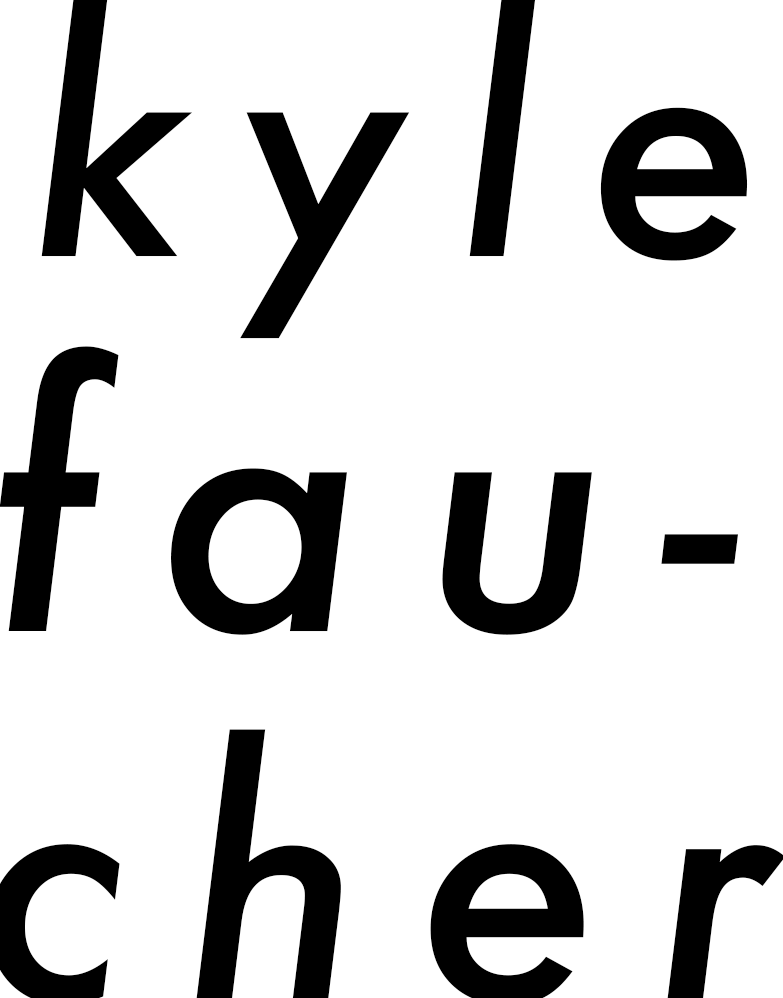
<style>
.page{position:relative;width:783px;height:998px;background:#ffffff}
.page>*{position:absolute;margin:0}
.t1{font:312.2px "Futura-MediumItalic";letter-spacing:0.16em;color:#000000}
.t2{font:345.1px "Futura-MediumItalic";letter-spacing:0.16em;color:#000000}
</style>
<div class="page">
<p class="t1" style="left:41px;top:0px;width:707px;height:339px">kyle</p>
<p class="t2" style="left:0px;top:346px;width:738px;height:289px">fau-</p>
</div>
